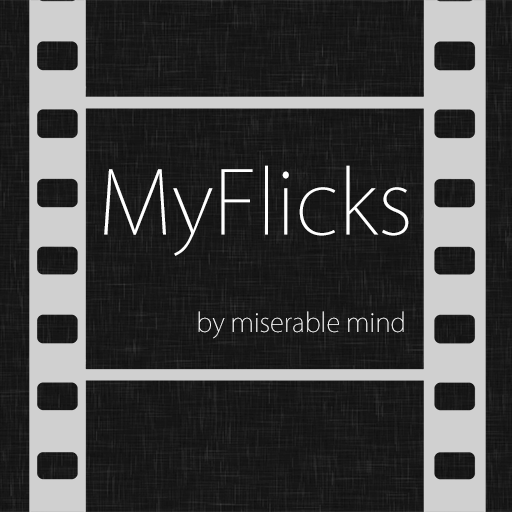
<style>
.page{position:relative;width:512px;height:512px}
.page>*{position:absolute;margin:0}
.t1{font:86.3px "KozGoPro-ExtraLight";color:#ffffff}
.t2{font:25.9px "KozGoPr6N-ExtraLight";color:#ffffff}
</style>
<div class="page">
<p class="t1" style="left:104px;top:165px;width:305px;height:91px">MyFlicks</p>
<p class="t2" style="left:198px;top:311px;width:206px;height:28px">by miserable mind</p>
</div>
